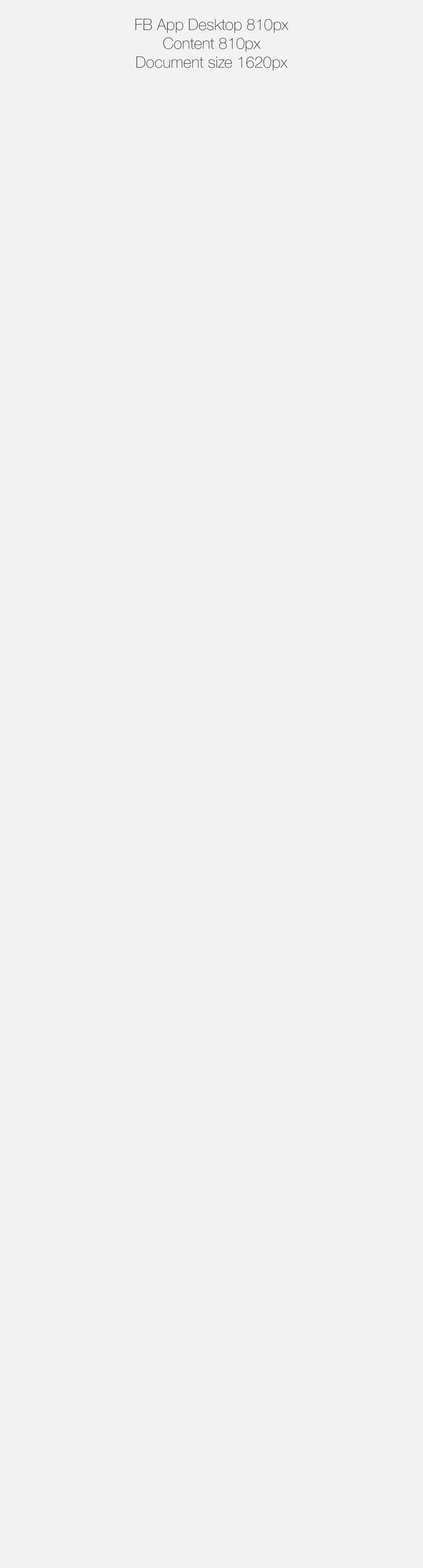
<style>
.page{position:relative;width:423px;height:1568px;background:#f2f2f2}
.page>*{position:absolute;margin:0}
.t1{font:15.7px "HelveticaNeue-Thin";color:#373737}
</style>
<div class="page">
<p class="t1" style="left:135px;top:19px;width:154px;height:52px;text-align:center">FB App Desktop 810px<br>Content 810px<br>Document size 1620px</p>
</div>
